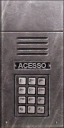
<style>
.page{position:relative;width:64px;height:128px}
.page>*{position:absolute;margin:0}
.t1{font:7px "Arial-BoldMT";letter-spacing:-0.04em;color:#9e9599}
.t2{font:7px "Arial-BoldMT";letter-spacing:-0.04em;color:#9e9599;font-weight:bold}
</style>
<div class="page">
<p class="t1" style="left:18px;top:63px;width:28px;height:5px"><span class="t2"> </span>ACESSO</p>
</div>
